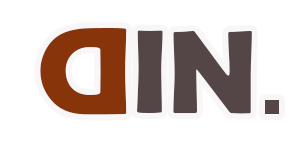
<style>
.page{position:relative;width:300px;height:150px;background:#ffffff}
.page>*{position:absolute;margin:0}
.t1{font:126.2px "BerlinSansFBDemi-Bold";color:#88340a;scale:1.07 1}
.t2{font:120.5px "BerlinSansFBDemi-Bold";color:#544646}
</style>
<div class="page">
<p class="t1" style="left:40px;top:28px;width:87px;height:87px;rotate:180deg">D</p>
<p class="t2" style="left:137px;top:30px;width:115px;height:84px">IN</p>
</div>
